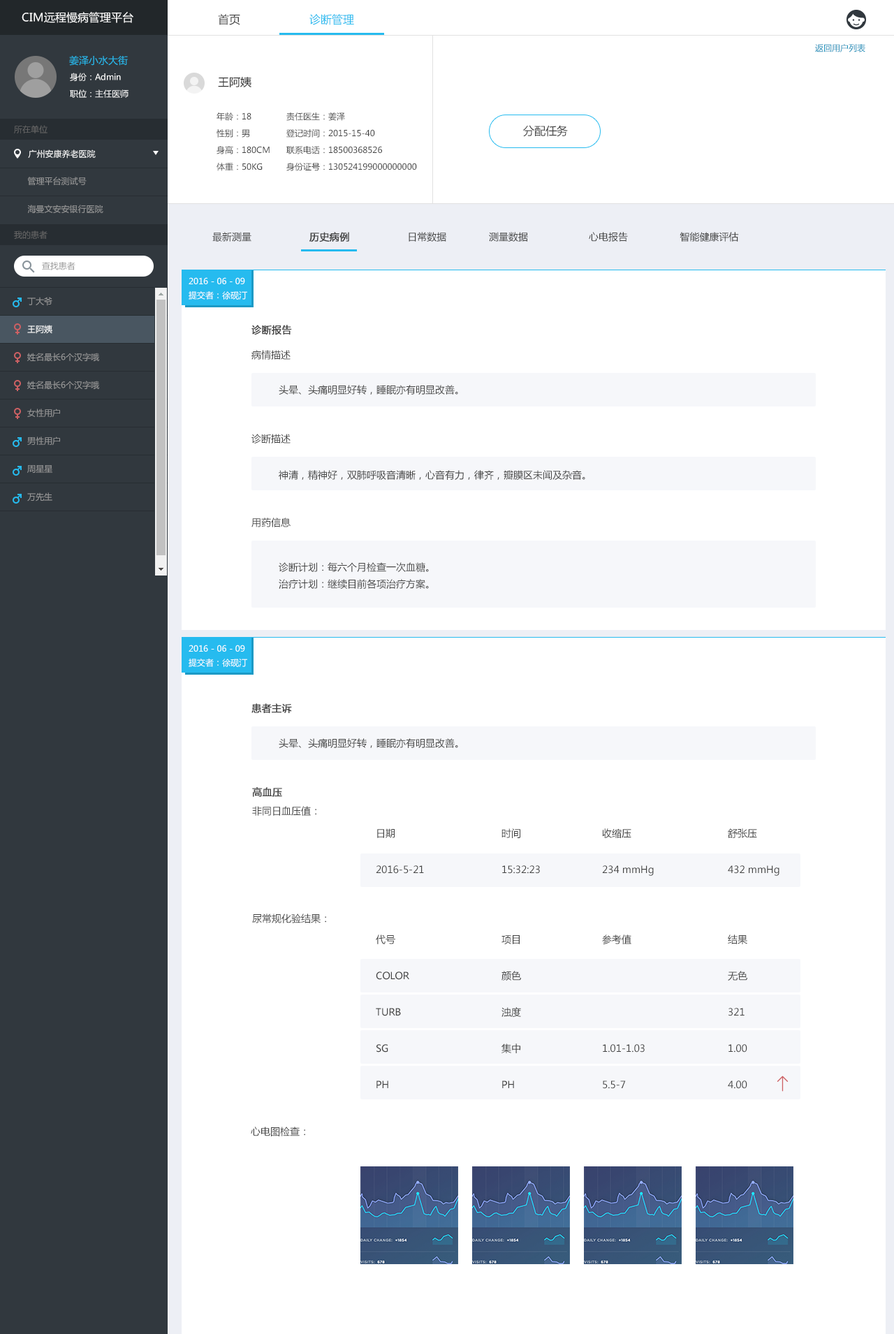
<style>
.page{position:relative;width:894px;height:1334px;background:#ffffff}
.page>*{position:absolute;margin:0}
.t1{font:11.2px "MicrosoftYaHei";color:#ffffff}
.t2{font:11.2px "MicrosoftYaHei";color:#434343}
.t3{font:11.2px "MicrosoftYaHei";color:#26bbef}
.t4{font:8.4px "MicrosoftYaHei";color:#1790ba}
.t5{font:9.8px "MicrosoftYaHei";color:#26bbef}
.t6{font:8.4px "MicrosoftYaHei";color:#ffffff}
.t7{font:11.2px "MicrosoftYaHei";color:#333333}
.t8{font:8.4px/16.8px "MicrosoftYaHei";color:#434343}
.t9{font:8.4px "MicrosoftYaHei";color:#666666}
.t10{font:8.4px "MicrosoftYaHei";color:#999999}
.t11{font:9.8px "MicrosoftYaHei";color:#434343}
.t12{font:9.8px "MicrosoftYaHei";color:#434343;font-weight:bold}
.t13{font:8.4px/14px "MicrosoftYaHei";color:#ffffff}
.t14{font:8.4px/14px "MicrosoftYaHei";color:#999999}
.t15{font:9.8px/16.8px "MicrosoftYaHei";color:#434343}
</style>
<div class="page">
<p class="t1" style="left:22px;top:12px;width:111px;height:11px">CIM远程慢病管理平台</p>
<p class="t2" style="left:218px;top:14px;width:22px;height:11px">首页</p>
<p class="t3" style="left:309px;top:14px;width:45px;height:11px">诊断管理</p>
<p class="t4" style="left:815px;top:44px;width:50px;height:8px">返回用户列表</p>
<p class="t5" style="left:69px;top:55px;width:59px;height:11px">姜泽小水大街</p>
<p class="t6" style="left:70px;top:73px;width:51px;height:8px">身份：Admin</p>
<p class="t7" style="left:218px;top:77px;width:33px;height:10px">王阿姨</p>
<p class="t6" style="left:70px;top:89px;width:59px;height:9px">职位：主任医师</p>
<p class="t8" style="left:216px;top:112px;width:54px;height:59px">年龄：18 <br>性别：男<br>身高：180CM<br>体重：50KG</p>
<p class="t8" style="left:286px;top:112px;width:131px;height:59px">责任医生：姜泽<br>登记时间：2015-15-40<br>联系电话：18500368526<br>身份证号：130524199000000000</p>
<p class="t9" style="left:14px;top:125px;width:33px;height:8px">所在单位</p>
<p class="t2" style="left:523px;top:125px;width:45px;height:12px">分配任务</p>
<p class="t6" style="left:28px;top:149px;width:68px;height:10px">广州安康养老医院</p>
<p class="t10" style="left:27px;top:177px;width:60px;height:9px">管理平台测试号</p>
<p class="t10" style="left:27px;top:205px;width:76px;height:8px">海曼文安安银行医院</p>
<p class="t9" style="left:14px;top:230px;width:33px;height:9px">我的患者</p>
<p class="t11" style="left:212px;top:232px;width:527px;height:10px">最新测量                    <span class="t12">历史病例</span>                    日常数据  测量数据                     心电报告                  智能健康评估</p>
<p class="t10" style="left:42px;top:262px;width:33px;height:8px">查找患者</p>
<p class="t13" style="left:189px;top:277px;width:58px;height:23px">2016 - 06 - 09<br>提交者：徐砚汀</p>
<p class="t14" style="left:27px;top:297px;width:72px;height:204px">丁大爷<br><br><span class="t13">王阿姨<br></span><br>姓名最长6个汉字哦<br><br>姓名最长6个汉字哦<br><br>女性用户<br><br>男性用户<br><br>周星星<br><br>万先生<br><br>男女图表请区分<br><br>男性用户<br><br>男性用户<br><br>女性用户<br><br>工程师</p>
<p class="t12" style="left:251px;top:325px;width:41px;height:10px">诊断报告</p>
<p class="t11" style="left:251px;top:350px;width:40px;height:10px">病情描述</p>
<p class="t11" style="left:279px;top:385px;width:179px;height:10px">头晕、头痛明显好转，睡眠亦有明显改善。</p>
<p class="t11" style="left:251px;top:434px;width:40px;height:9px">诊断描述</p>
<p class="t11" style="left:279px;top:470px;width:306px;height:10px">神清，精神好，双肺呼吸音清晰，心音有力，律齐，瓣膜区未闻及杂音。</p>
<p class="t11" style="left:251px;top:518px;width:40px;height:9px">用药信息</p>
<p class="t15" style="left:279px;top:562px;width:150px;height:27px">诊断计划：每六个月检查一次血糖。<br>治疗计划：继续目前各项治疗方案。</p>
<p class="t13" style="left:189px;top:645px;width:58px;height:22px">2016 - 06 - 09<br>提交者：徐砚汀</p>
<p class="t12" style="left:251px;top:703px;width:41px;height:10px">患者主诉</p>
<p class="t11" style="left:279px;top:738px;width:179px;height:10px">头晕、头痛明显好转，睡眠亦有明显改善。</p>
<p class="t12" style="left:252px;top:787px;width:30px;height:10px">高血压</p>
<p class="t11" style="left:252px;top:806px;width:64px;height:10px">非同日血压值：</p>
<p class="t11" style="left:377px;top:828px;width:380px;height:10px">日期     时间    收缩压    舒张压</p>
<p class="t11" style="left:376px;top:865px;width:403px;height:11px">2016-5-21    15:32:23   234 mmHg   432 mmHg</p>
<p class="t11" style="left:252px;top:913px;width:74px;height:10px">尿常规化验结果：</p>
<p class="t11" style="left:376px;top:934px;width:371px;height:10px">代号     项目    参考值    结果</p>
<p class="t11" style="left:376px;top:971px;width:371px;height:10px">COLOR    颜色          无色</p>
<p class="t11" style="left:376px;top:1007px;width:368px;height:10px">TURB    浊度          321</p>
<p class="t11" style="left:376px;top:1043px;width:371px;height:10px">SG     集中    1.01-1.03    1.00</p>
<p class="t11" style="left:376px;top:1080px;width:371px;height:9px">PH     PH    5.5-7     4.00</p>
<p class="t11" style="left:251px;top:1126px;width:54px;height:10px">心电图检查：</p>
</div>
